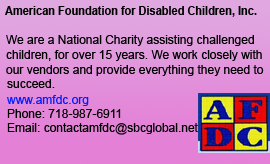
<style>
.page{position:relative;width:270px;height:164px}
.page>*{position:absolute;margin:0}
.t1{font:12px "Arial-BoldMT";color:#000000;scale:0.91 1}
.t2{font:12px "ArialMT";color:#000000}
.t3{font:12px "ArialMT";color:#001eff}
</style>
<div class="page">
<p class="t1" style="left:5px;top:6px;width:252px;height:11px">American Foundation for Disabled Children, Inc.</p>
<p class="t2" style="left:6px;top:35px;width:248px;height:11px">We are a National Charity assisting challenged</p>
<p class="t2" style="left:6px;top:50px;width:256px;height:11px">children, for over 15 years. We work closely with</p>
<p class="t2" style="left:6px;top:65px;width:258px;height:11px">our vendors and provide everything they need to</p>
<p class="t2" style="left:7px;top:79px;width:48px;height:9px">succeed.</p>
<p class="t3" style="left:7px;top:95px;width:82px;height:11px">www.amfdc.org</p>
<p class="t2" style="left:7px;top:109px;width:114px;height:9px">Phone: 718-987-6911</p>
<p class="t2" style="left:7px;top:123px;width:191px;height:12px">Email: contactamfdc@sbcglobal.net</p>
</div>
